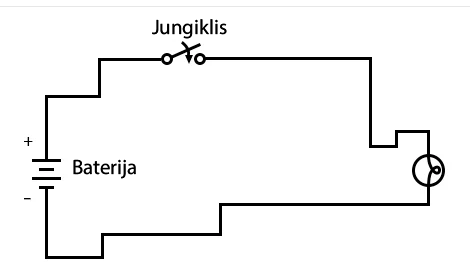
<style>
.page{position:relative;width:470px;height:273px;background:#ffffff}
.page>*{position:absolute;margin:0}
.t1{font:20.8px "MyriadPro-Regular";color:#000000}
</style>
<div class="page">
<p class="t1" style="left:152px;top:19px;width:75px;height:20px">Jungiklis</p>
<p class="t1" style="left:73px;top:159px;width:63px;height:20px">Baterija</p>
</div>
